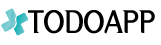
<style>
.page{position:relative;width:161px;height:45px;background:#ffffff}
.page>*{position:absolute;margin:0}
.t1{font:30px "Alex";letter-spacing:-0.02em;color:#000000;text-transform:uppercase}
</style>
<div class="page">
<p class="t1" style="left:28px;top:10px;width:127px;height:24px">TODoApp</p>
</div>
